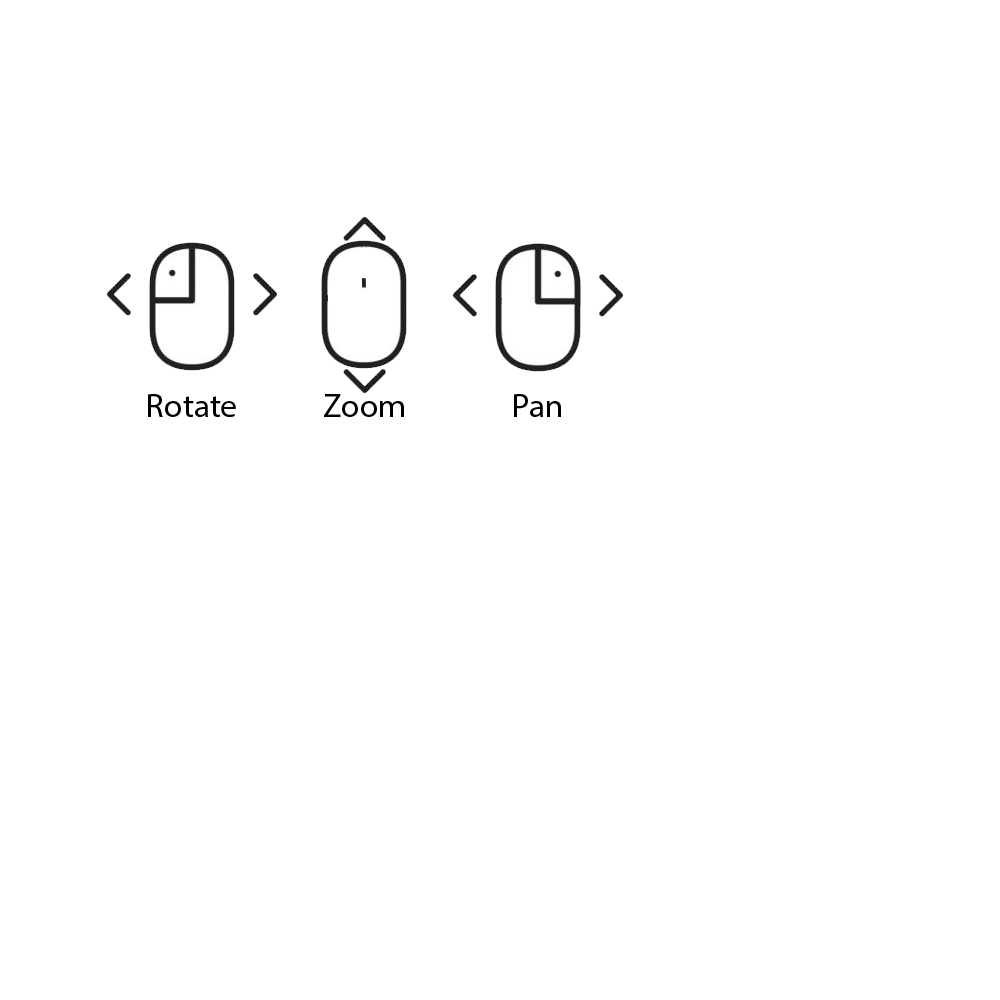
<style>
.page{position:relative;width:1000px;height:1000px;background:#ffffff}
.page>*{position:absolute;margin:0}
.t1{font:33.3px "MyriadPro-Regular";color:#000000}
</style>
<div class="page">
<p class="t1" style="left:148px;top:394px;width:88px;height:23px">Rotate</p>
<p class="t1" style="left:324px;top:394px;width:80px;height:23px">Zoom</p>
<p class="t1" style="left:514px;top:394px;width:47px;height:23px">Pan</p>
</div>
